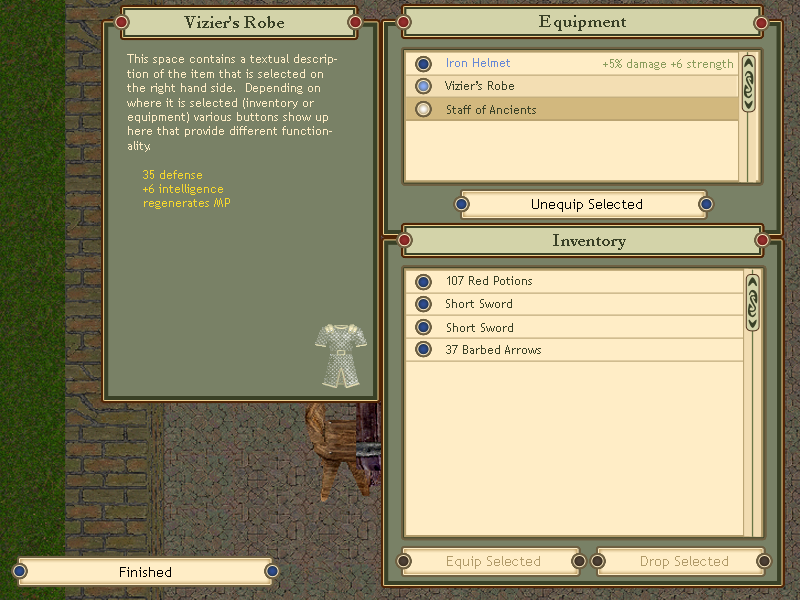
<style>
.page{position:relative;width:800px;height:600px;background:#ffedc6}
.page>*{position:absolute;margin:0}
.t1{font:18px "Garamond-Bold";color:#394026}
.t2{font:12px "TrebuchetMS";color:#ffedc6}
.t3{font:12px "TrebuchetMS";color:#f7d82e}
.t4{font:12px "TrebuchetMS";color:#6789d6}
.t5{font:12px "TrebuchetMS";color:#8b9c5d}
.t6{font:12px "TrebuchetMS";color:#394026}
.t7{font:14px "TrebuchetMS";color:#000000}
.t8{font:14px "TrebuchetMS";color:#b19b6a}
</style>
<div class="page">
<p class="t1" style="left:184px;top:16px;width:100px;height:12px">Vizier’s Robe</p>
<p class="t1" style="left:539px;top:15px;width:87px;height:16px">Equipment</p>
<p class="t2" style="left:127px;top:54px;width:210px;height:155px">This space contains a textual description of the item that is selected on the right hand side.  Depending on where it is selected (inventory or equipment) various buttons show up here that provide different functionality.<br><br><span class="t3">    35 defense<br>    +6 intelligence<br>    regenerates MP</span></p>
<p class="t4" style="left:447px;top:58px;width:63px;height:9px">Iron Helmet</p>
<p class="t5" style="left:603px;top:59px;width:130px;height:11px">+5% damage +6 strength</p>
<p class="t6" style="left:445px;top:81px;width:69px;height:9px">Vizier’s Robe</p>
<p class="t6" style="left:447px;top:105px;width:89px;height:9px">Staff of Ancients</p>
<p class="t7" style="left:532px;top:199px;width:110px;height:13px">Unequip Selected</p>
<p class="t1" style="left:553px;top:234px;width:73px;height:16px">Inventory</p>
<p class="t6" style="left:447px;top:276px;width:85px;height:9px">107 Red Potions</p>
<p class="t6" style="left:446px;top:299px;width:66px;height:9px">Short Sword</p>
<p class="t6" style="left:447px;top:323px;width:66px;height:9px">Short Sword</p>
<p class="t6" style="left:446px;top:345px;width:95px;height:9px">37 Barbed Arrows</p>
<p class="t8" style="left:447px;top:556px;width:93px;height:13px">Equip Selected</p>
<p class="t8" style="left:641px;top:556px;width:87px;height:13px">Drop Selected</p>
<p class="t7" style="left:120px;top:567px;width:51px;height:10px">Finished</p>
</div>
